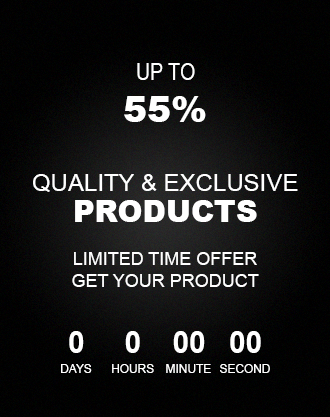
<style>
.page{position:relative;width:330px;height:417px}
.page>*{position:absolute;margin:0}
.t1{font:24px "ArialNarrow";color:#ffffff}
.t2{font:36px "Arial-Black";color:#ffffff}
.t3{font:24px "ArialMT";color:#ffffff}
.t4{font:30px "Arial-Black";color:#ffffff}
.t5{font:18px "ArialMT";color:#ffffff}
.t6{font:30.2px "Arial-BoldMT";color:#ffffff}
.t7{font:12px "ArialMT";color:#ffffff}
</style>
<div class="page">
<p class="t1" style="left:137px;top:63px;width:58px;height:17px">UP TO</p>
<p class="t2" style="left:124px;top:96px;width:82px;height:26px">55%</p>
<p class="t3" style="left:33px;top:174px;width:265px;height:18px">QUALITY &amp; EXCLUSIVE</p>
<p class="t4" style="left:75px;top:200px;width:182px;height:22px">PRODUCTS</p>
<p class="t5" style="left:72px;top:252px;width:187px;height:35px;text-align:center">LIMITED TIME OFFER<br>GET YOUR PRODUCT</p>
<p class="t6" style="left:69px;top:331px;width:15px;height:22px">0</p>
<p class="t6" style="left:125px;top:331px;width:15px;height:22px">0</p>
<p class="t6" style="left:173px;top:331px;width:32px;height:22px">00</p>
<p class="t6" style="left:230px;top:331px;width:31px;height:22px">00</p>
<p class="t7" style="left:61px;top:364px;width:31px;height:9px">DAYS</p>
<p class="t7" style="left:112px;top:364px;width:42px;height:9px">HOURS</p>
<p class="t7" style="left:166px;top:364px;width:45px;height:9px">MINUTE</p>
<p class="t7" style="left:220px;top:364px;width:50px;height:9px">SECOND</p>
</div>
